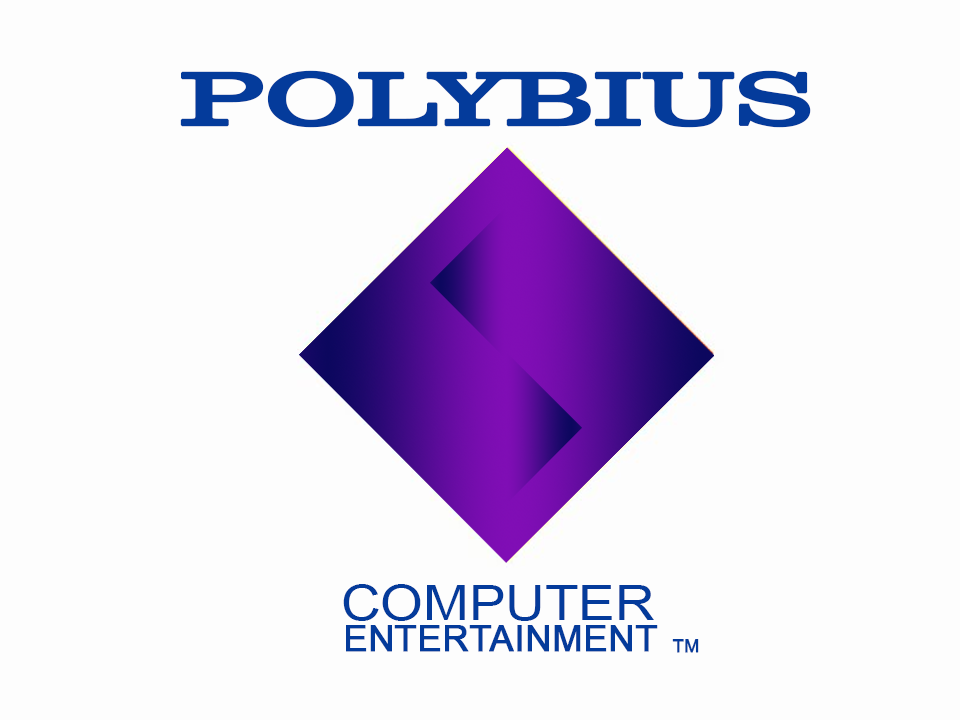
<style>
.page{position:relative;width:960px;height:720px;background:#fdfdfd}
.page>*{position:absolute;margin:0}
.t1{font:72px "Clarendon-Regular";color:#043b9b;font-weight:bold;scale:1.5 1}
.t2{font:48.9px "ArialMT";color:#043b9b;scale:1.12 1}
.t3{font:36.2px "ArialMT";color:#043b9b;font-weight:bold}
.t4{font:18.1px "ArialMT";color:#043b9b;font-weight:bold}
</style>
<div class="page">
<p class="t1" style="left:180px;top:70px;width:631px;height:58px">POLYBIUS</p>
<p class="t2" style="left:343px;top:584px;width:311px;height:37px">COMPUTER</p>
<p class="t3" style="left:346px;top:625px;width:312px;height:27px">ENTERTAINMENT</p>
<p class="t4" style="left:672px;top:639px;width:27px;height:14px">TM</p>
</div>
